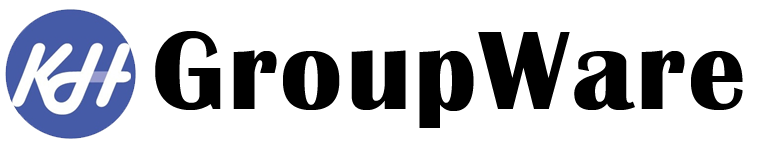
<style>
.page{position:relative;width:770px;height:149px;background:#ffffff}
.page>*{position:absolute;margin:0}
.t1{font:115.3px "BritannicBold";letter-spacing:0.025em;color:#000000}
</style>
<div class="page">
<p class="t1" style="left:155px;top:31px;width:588px;height:97px">GroupWare</p>
</div>
